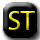
<style>
.page{position:relative;width:40px;height:40px;background:#000000}
.page>*{position:absolute;margin:0}
.t1{font:28px "MyriadPro-Regular"}
</style>
<div class="page">
<p class="t1" style="left:8px;top:11px;width:27px;height:19px">ST</p>
</div>
